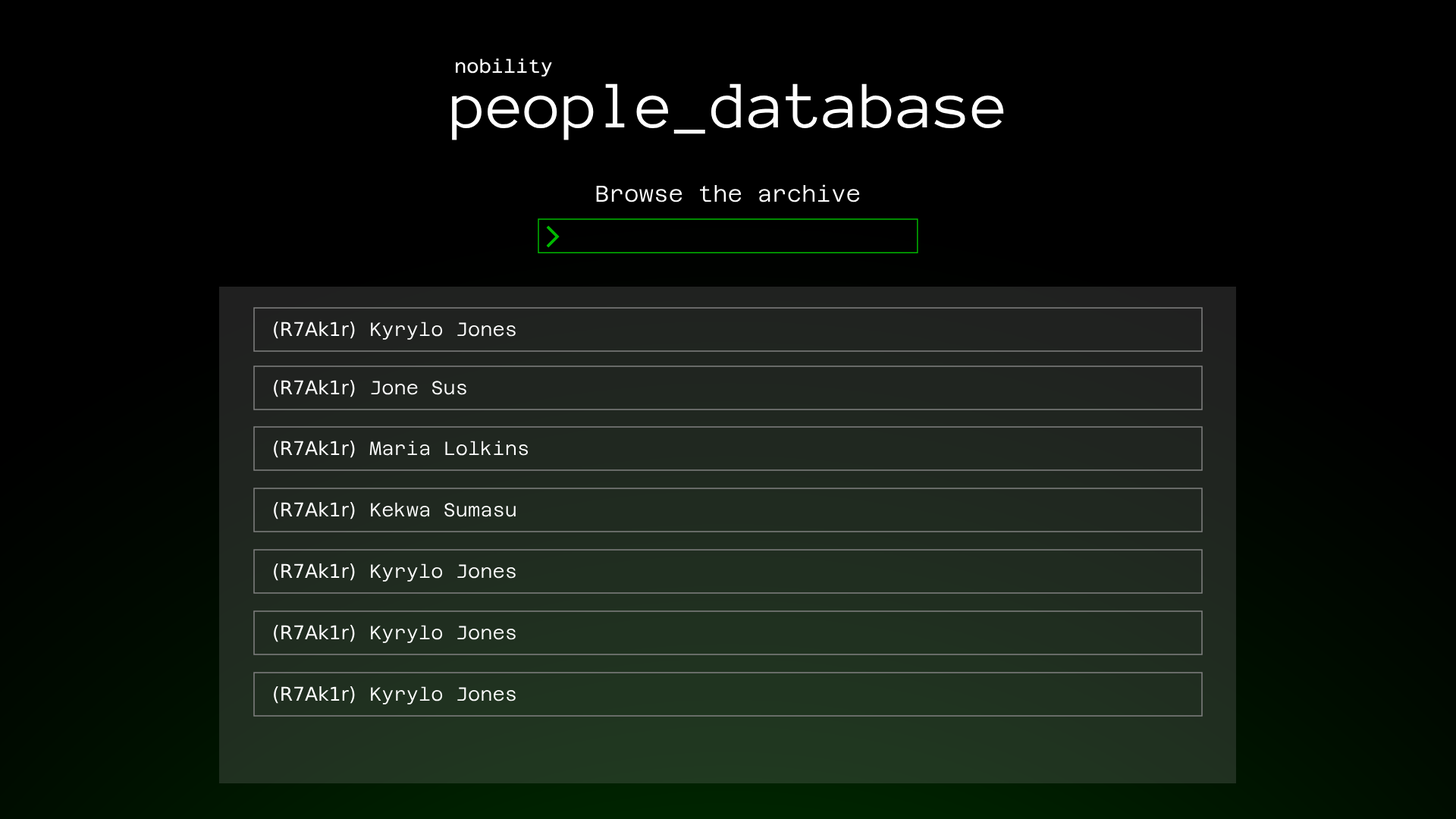
<style>
.page{position:relative;width:1456px;height:819px;background:#000000}
.page>*{position:absolute;margin:0}
.t1{font:19px "AzeretMono-Regular";color:#ffffff}
.t2{font:68.2px "AnonymousPro-Regular";color:#ffffff}
.t3{font:22.7px "AzeretMono-Light";color:#ffffff}
.t4{font:19px "DejaVuSans";color:#ffffff}
.t5{font:19px "AzeretMono-Light";color:#ffffff}
</style>
<div class="page">
<p class="t1" style="left:456px;top:58px;width:96px;height:19px">nobility</p>
<p class="t2" style="left:452px;top:83px;width:552px;height:57px">people_database</p>
<p class="t3" style="left:596px;top:184px;width:264px;height:18px">Browse the archive</p>
<p class="t4" style="left:274px;top:322px;width:81px;height:17px">(R7Аk1r)</p>
<p class="t5" style="left:371px;top:322px;width:145px;height:18px">Kyrylo Jones</p>
<p class="t4" style="left:274px;top:380px;width:81px;height:17px">(R7Аk1r)</p>
<p class="t5" style="left:371px;top:381px;width:95px;height:14px">Jone Sus</p>
<p class="t4" style="left:274px;top:441px;width:81px;height:17px">(R7Аk1r)</p>
<p class="t5" style="left:369px;top:441px;width:160px;height:15px">Maria Lolkins</p>
<p class="t4" style="left:274px;top:502px;width:81px;height:17px">(R7Аk1r)</p>
<p class="t5" style="left:371px;top:502px;width:145px;height:15px">Kekwa Sumasu</p>
<p class="t4" style="left:274px;top:563px;width:81px;height:18px">(R7Аk1r)</p>
<p class="t5" style="left:371px;top:563px;width:145px;height:19px">Kyrylo Jones</p>
<p class="t4" style="left:274px;top:625px;width:81px;height:17px">(R7Аk1r)</p>
<p class="t5" style="left:371px;top:625px;width:145px;height:18px">Kyrylo Jones</p>
<p class="t4" style="left:274px;top:686px;width:81px;height:18px">(R7Аk1r)</p>
<p class="t5" style="left:371px;top:686px;width:145px;height:18px">Kyrylo Jones</p>
</div>
